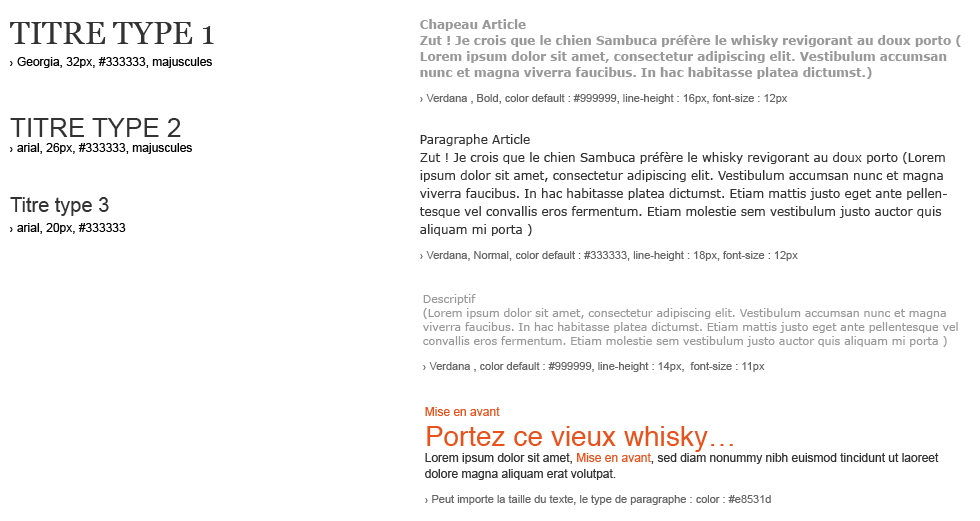
<style>
.page{position:relative;width:980px;height:521px;background:#ffffff}
.page>*{position:absolute;margin:0}
.t1{font:32px "Georgia";color:#333333;text-transform:uppercase}
.t2{font:12px/16px "Verdana-Bold";color:#999999}
.t3{font:11px/15px "ArialMT";color:#666666}
.t4{font:12px "ArialMT";color:#000000}
.t5{font:12px "ArialMT";color:#000000;text-transform:uppercase}
.t6{font:26px "ArialMT";color:#333333;text-transform:uppercase}
.t7{font:12px/18px "Verdana";color:#333333}
.t8{font:20px "ArialMT";color:#333333}
.t9{font:11px/14px "Verdana";color:#999999}
.t10{font:12px/16px "ArialMT";color:#333333}
.t11{font:12px/16px "ArialMT";color:#e8531d}
.t12{font:28px/30px "Helvetica";color:#e8531d}
</style>
<div class="page">
<p class="t1" style="left:10px;top:22px;width:204px;height:22px">titre type 1</p>
<p class="t2" style="left:420px;top:19px;width:541px;height:85px">Chapeau Article<br>Zut ! Je crois que le chien Sambuca préfère le whisky revigorant au doux porto ( Lorem ipsum dolor sit amet, consectetur adipiscing elit. Vestibulum accumsan nunc et magna viverra faucibus. In hac habitasse platea dictumst.)<br><span class="t3">› Verdana , Bold, color default : #999999, line-height : 16px, font-size : 12px</span></p>
<p class="t4" style="left:10px;top:57px;width:202px;height:11px"><span class="t5">› </span>Georgia, 32px, #333333, majuscules</p>
<p class="t6" style="left:10px;top:118px;width:171px;height:19px">titre type 2</p>
<p class="t7" style="left:420px;top:134px;width:527px;height:127px">Paragraphe Article<br>Zut ! Je crois que le chien Sambuca préfère le whisky revigorant au doux porto (Lorem ipsum dolor sit amet, consectetur adipiscing elit. Vestibulum accumsan nunc et magna viverra faucibus. In hac habitasse platea dictumst. Etiam mattis justo eget ante pellentesque vel convallis eros fermentum. Etiam molestie sem vestibulum justo auctor quis aliquam mi porta )<br><span class="t3">› Verdana, Normal, color default : #333333, line-height : 18px, font-size : 12px</span></p>
<p class="t4" style="left:10px;top:143px;width:182px;height:11px"><span class="t5">› </span>arial, 26px, #333333, majuscules</p>
<p class="t8" style="left:10px;top:197px;width:99px;height:19px">Titre type 3</p>
<p class="t4" style="left:10px;top:223px;width:116px;height:11px"><span class="t5">› </span>arial, 20px, #333333</p>
<p class="t9" style="left:423px;top:294px;width:535px;height:78px">Descriptif <br>(Lorem ipsum dolor sit amet, consectetur adipiscing elit. Vestibulum accumsan nunc et magna viverra faucibus. In hac habitasse platea dictumst. Etiam mattis justo eget ante pellentesque vel convallis eros fermentum. Etiam molestie sem vestibulum justo auctor quis aliquam mi porta )<br><span class="t3">› Verdana , color default : #999999, line-height : 14px,  font-size : 11px</span></p>
<p class="t10" style="left:425px;top:407px;width:514px;height:98px"><span class="t11">Mise en avant<br></span><span class="t12">Portez ce vieux whisky…<br></span>Lorem ipsum dolor sit amet,<span class="t11"> Mise en avant</span>, sed diam nonummy nibh euismod tincidunt ut laoreet dolore magna aliquam erat volutpat.<br><span class="t3">› Peut importe la taille du texte, le type de paragraphe : color : #e8531d</span></p>
</div>
